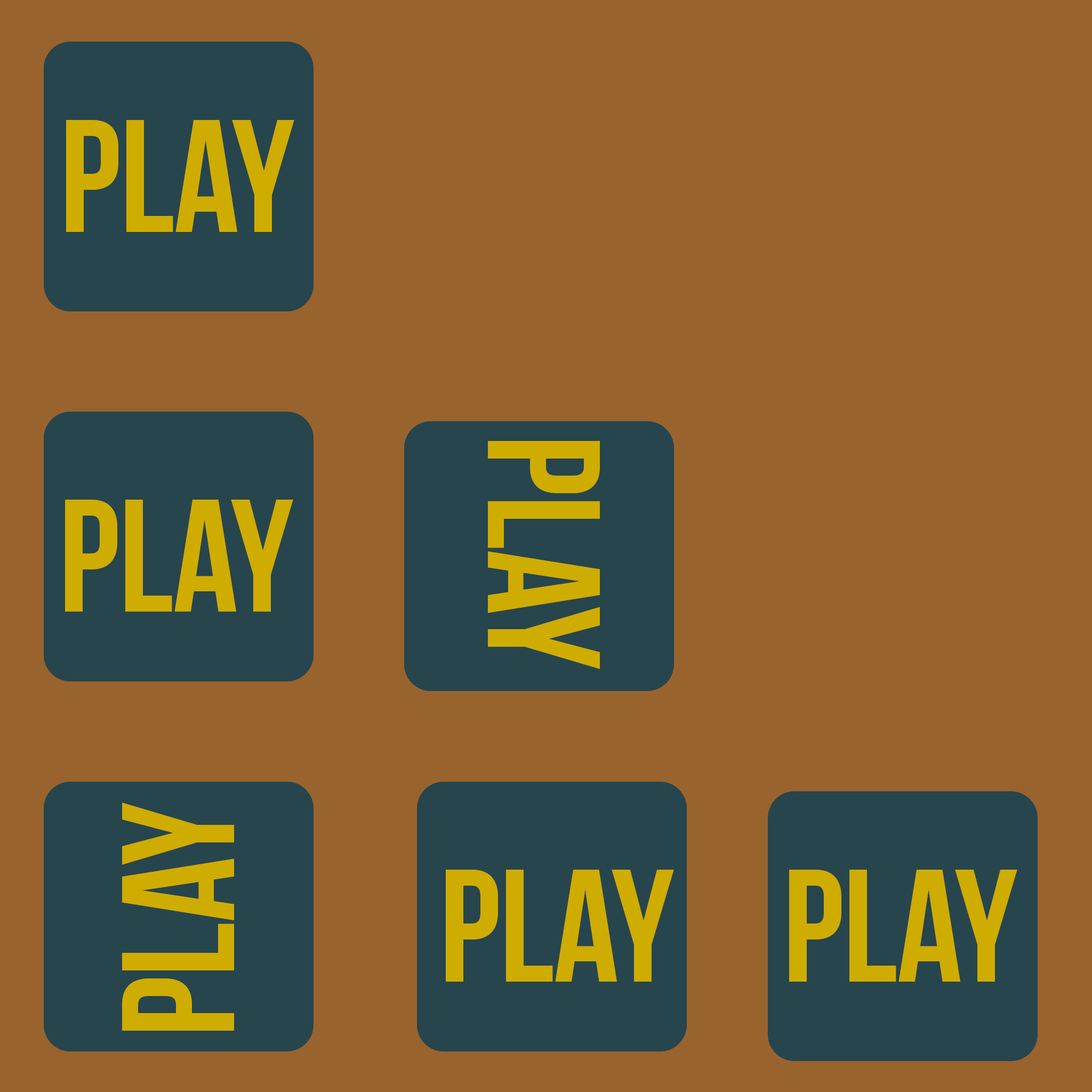
<style>
.page{position:relative;width:1092px;height:1092px;background:#99632e}
.page>*{position:absolute;margin:0}
.t1{font:160px "BebasNeue";color:#cfac00}
</style>
<div class="page">
<p class="t1" style="left:66px;top:120px;width:228px;height:112px">play</p>
<p class="t1" style="left:488px;top:441px;width:112px;height:228px;rotate:90deg">play</p>
<p class="t1" style="left:65px;top:500px;width:228px;height:112px">play</p>
<p class="t1" style="left:122px;top:802px;width:112px;height:229px;rotate:-90deg">play</p>
<p class="t1" style="left:446px;top:870px;width:228px;height:112px">play</p>
<p class="t1" style="left:789px;top:870px;width:228px;height:112px">play</p>
</div>
